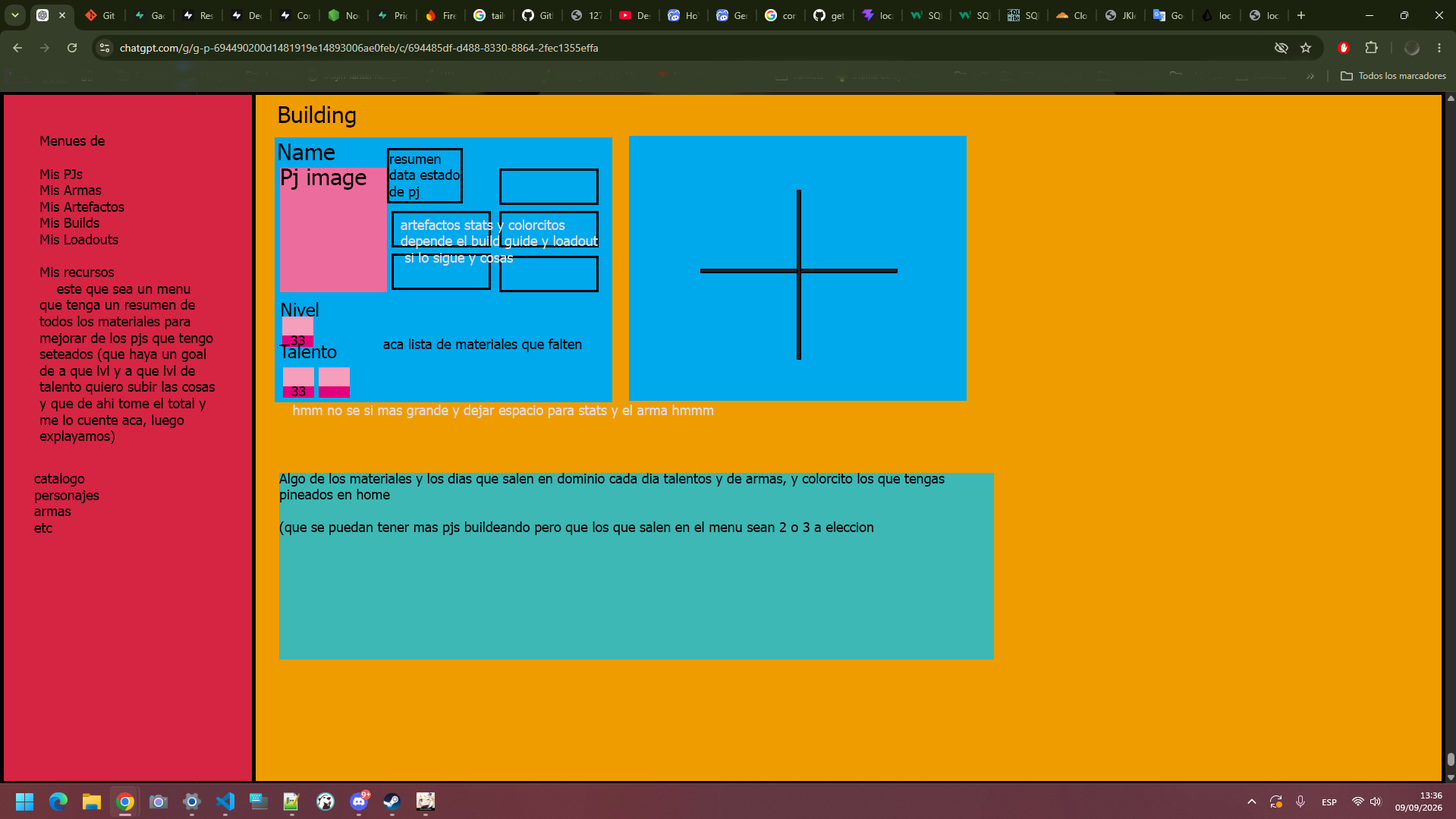
<style>
.page{position:relative;width:1456px;height:819px;background:#ef9c00}
.page>*{position:absolute;margin:0}
.t1{font:22.8px "Tahoma";color:#000000}
.t2{font:13.7px "Tahoma";color:#000000}
.t3{font:13.7px "Tahoma";color:#dfdfdf}
.t4{font:18.2px "Tahoma";color:#000000}
</style>
<div class="page">
<p class="t1" style="left:279px;top:105px;width:77px;height:22px">Building</p>
<p class="t2" style="left:39px;top:135px;width:176px;height:309px">Menues de <br><br>Mis PJs <br>Mis Armas<br>Mis Artefactos<br>Mis Builds<br>Mis Loadouts<br><br>Mis recursos<br>    este que sea un menu que tenga un resumen de todos los materiales para mejorar de los pjs que tengo seteados (que haya un goal de a que lvl y a que lvl de talento quiero subir las cosas y que de ahi tome el total y me lo cuente aca, luego explayamos)</p>
<p class="t1" style="left:279px;top:143px;width:56px;height:17px">Name</p>
<p class="t2" style="left:389px;top:156px;width:71px;height:44px">resumen data estado de pj</p>
<p class="t1" style="left:282px;top:168px;width:85px;height:22px">Pj image</p>
<p class="t3" style="left:401px;top:219px;width:197px;height:47px">artefactos stats y colorcitos<br>depende el build guide y loadout<br> si lo sigue y cosas</p>
<p class="t4" style="left:282px;top:302px;width:37px;height:14px">Nivel</p>
<p class="t2" style="left:291px;top:335px;width:14px;height:10px">33</p>
<p class="t2" style="left:383px;top:338px;width:199px;height:14px">aca lista de materiales que falten</p>
<p class="t4" style="left:279px;top:344px;width:58px;height:14px">Talento</p>
<p class="t2" style="left:291px;top:386px;width:15px;height:10px">33</p>
<p class="t3" style="left:293px;top:404px;width:421px;height:14px">hmm no se si mas grande y dejar espacio para stats y el arma hmmm</p>
<p class="t2" style="left:34px;top:473px;width:65px;height:60px">catalogo<br>personajes<br>armas <br>etc</p>
<p class="t2" style="left:279px;top:473px;width:666px;height:62px">Algo de los materiales y los dias que salen en dominio cada dia talentos y de armas, y colorcito los que tengas pineados en home<br><br>(que se puedan tener mas pjs buildeando pero que los que salen en el menu sean 2 o 3 a eleccion</p>
</div>
